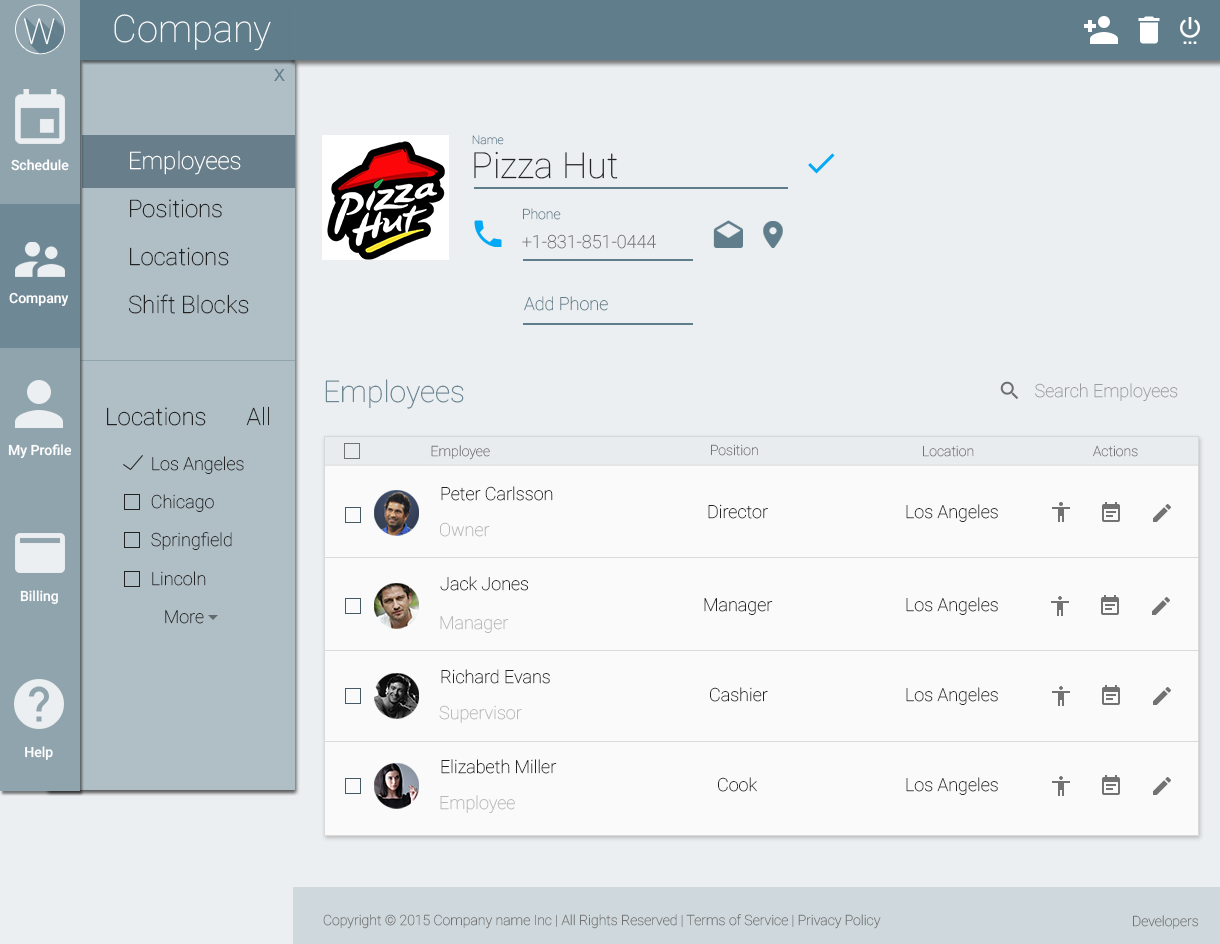
<style>
.page{position:relative;width:1220px;height:944px;background:#eceff1}
.page>*{position:absolute;margin:0}
.t1{font:38px "Roboto-Thin";color:#ffffff}
.t2{font:35.7px "Roboto-Thin";color:#ffffff}
.t3{font:18px "Raavi";color:#607d8b}
.t4{font:12px "Roboto-Thin";color:#607d8b}
.t5{font:24px/48px "Roboto-Thin";color:#222222}
.t6{font:24px/48px "Roboto-Thin";color:#ffffff}
.t7{font:14px "Roboto-Medium";color:#ffffff}
.t8{font:36px "Roboto-Thin";color:#222222}
.t9{font:14px "Roboto-Thin";color:#607d8b}
.t10{font:18px "Roboto-Thin";color:#727272}
.t11{font:18px "Roboto-Thin";color:#607d8b}
.t12{font:30px "Roboto-Thin";color:#607d8b}
.t13{font:18px "Roboto-Thin";color:#9b9d9d}
.t14{font:24px "Roboto-Thin";color:#222222}
.t15{font:14px "Roboto-Thin";color:#727272}
.t16{font:18px/38px "Roboto-Thin";color:#222222}
.t17{font:18px "Roboto-Thin";color:#222222}
.t18{font:18px/39px "Roboto-Thin";color:#222222}
.t19{font:18px "Roboto-Thin";color:#b8b8b8}
</style>
<div class="page">
<p class="t1" style="left:114px;top:14px;width:157px;height:37px">Company</p>
<p class="t2" style="left:24px;top:19px;width:31px;height:27px">W</p>
<p class="t2" style="left:24px;top:18px;width:31px;height:27px">W</p>
<p class="t3" style="left:274px;top:69px;width:11px;height:12px">X</p>
<p class="t4" style="left:472px;top:135px;width:32px;height:10px">Name</p>
<p class="t5" style="left:129px;top:150px;width:120px;height:164px"><span class="t6">Employees<br></span>Positions<br>Locations<br>Shift Blocks</p>
<p class="t7" style="left:11px;top:159px;width:58px;height:12px">Schedule</p>
<p class="t8" style="left:474px;top:151px;width:144px;height:28px">Pizza Hut</p>
<p class="t9" style="left:523px;top:208px;width:38px;height:12px">Phone</p>
<p class="t10" style="left:522px;top:234px;width:134px;height:15px">+1-831-851-0444</p>
<p class="t7" style="left:9px;top:292px;width:60px;height:14px">Company</p>
<p class="t11" style="left:524px;top:296px;width:84px;height:15px">Add Phone</p>
<p class="t12" style="left:325px;top:379px;width:139px;height:30px">Employees</p>
<p class="t13" style="left:1035px;top:383px;width:143px;height:18px">Search Employees</p>
<p class="t14" style="left:107px;top:406px;width:162px;height:20px">Locations       All</p>
<p class="t7" style="left:8px;top:444px;width:64px;height:15px">My Profile</p>
<p class="t15" style="left:431px;top:445px;width:59px;height:15px">Employee</p>
<p class="t15" style="left:711px;top:444px;width:47px;height:12px">Position</p>
<p class="t15" style="left:923px;top:445px;width:51px;height:12px">Location</p>
<p class="t15" style="left:1093px;top:445px;width:45px;height:12px">Actions</p>
<p class="t16" style="left:151px;top:456px;width:93px;height:168px"><span class="t17">Los Angeles<br></span>Chicago<br>Springfield<br><span class="t18">Lincoln<br></span>   More</p>
<p class="t17" style="left:441px;top:486px;width:112px;height:15px">Peter Carlsson</p>
<p class="t17" style="left:708px;top:504px;width:60px;height:15px">Director</p>
<p class="t17" style="left:906px;top:504px;width:92px;height:18px">Los Angeles</p>
<p class="t19" style="left:440px;top:522px;width:50px;height:15px">Owner</p>
<p class="t17" style="left:440px;top:576px;width:88px;height:15px">Jack Jones</p>
<p class="t7" style="left:20px;top:590px;width:38px;height:15px">Billing</p>
<p class="t17" style="left:704px;top:598px;width:69px;height:17px">Manager</p>
<p class="t17" style="left:906px;top:597px;width:92px;height:18px">Los Angeles</p>
<p class="t19" style="left:440px;top:616px;width:69px;height:17px">Manager</p>
<p class="t17" style="left:441px;top:669px;width:109px;height:15px">Richard Evans</p>
<p class="t17" style="left:710px;top:687px;width:58px;height:15px">Cashier</p>
<p class="t17" style="left:906px;top:687px;width:92px;height:18px">Los Angeles</p>
<p class="t19" style="left:439px;top:705px;width:83px;height:18px">Supervisor</p>
<p class="t7" style="left:25px;top:746px;width:28px;height:14px">Help</p>
<p class="t17" style="left:441px;top:759px;width:116px;height:15px">Elizabeth Miller</p>
<p class="t17" style="left:718px;top:777px;width:39px;height:15px">Cook</p>
<p class="t17" style="left:906px;top:777px;width:92px;height:18px">Los Angeles</p>
<p class="t19" style="left:440px;top:795px;width:75px;height:18px">Employee</p>
<p class="t15" style="left:323px;top:914px;width:558px;height:15px">Copyright © 2015 Company name Inc | All Rights Reserved | Terms of Service | Privacy Policy</p>
<p class="t15" style="left:1133px;top:915px;width:65px;height:14px">Developers</p>
</div>
